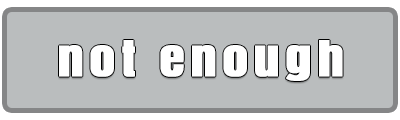
<style>
.page{position:relative;width:400px;height:120px;background:#babdbe}
.page>*{position:absolute;margin:0}
.t1{font:41.7px "Anton";letter-spacing:0.1em;color:#ffffff;font-weight:bold;scale:1.2 1}
</style>
<div class="page">
<p class="t1" style="left:59px;top:40px;width:284px;height:41px">not enough</p>
</div>
